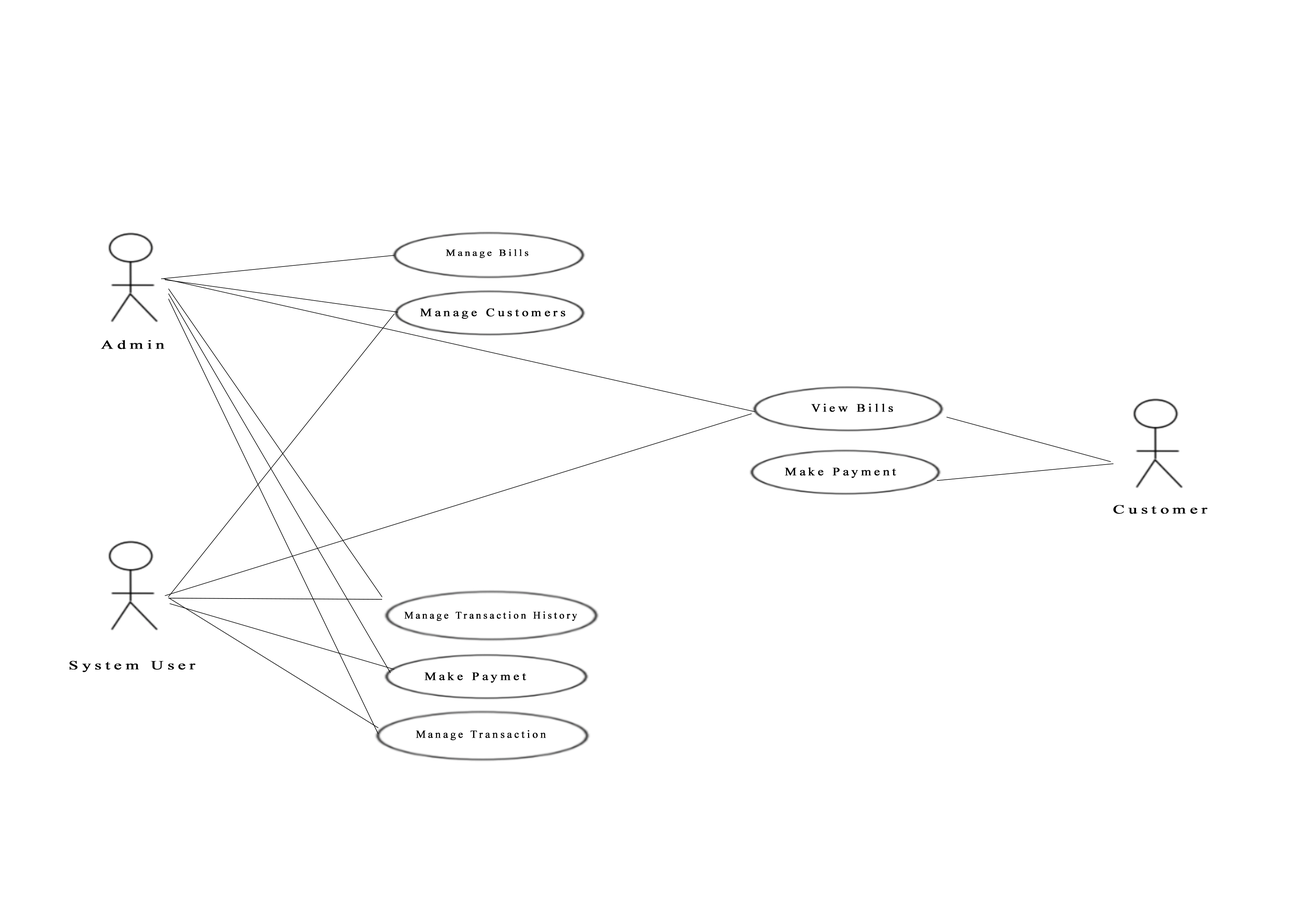
<style>
.page{position:relative;width:1299px;height:918px;background:#ffffff}
.page>*{position:absolute;margin:0}
.t1{font:9.5px "TimesNewRomanPSMT";letter-spacing:0.2em;color:#000000;font-weight:bold;scale:1.11 1}
.t2{font:11.5px "TimesNewRomanPSMT";letter-spacing:0.2em;color:#000000;font-weight:bold;scale:1.13 1}
.t3{font:12.4px "TimesNewRomanPSMT";letter-spacing:0.2em;color:#000000;font-weight:bold;scale:1.39 1}
.t4{font:10.3px "TimesNewRomanPSMT";letter-spacing:0.2em;color:#000000;font-weight:bold}
.t5{font:11px "TimesNewRomanPSMT";letter-spacing:0.2em;color:#000000;font-weight:bold}
</style>
<div class="page">
<p class="t1" style="left:446px;top:249px;width:82px;height:9px">Manage Bills</p>
<p class="t2" style="left:420px;top:308px;width:145px;height:11px">Manage Customers</p>
<p class="t3" style="left:101px;top:340px;width:63px;height:9px">Admin</p>
<p class="t2" style="left:811px;top:404px;width:82px;height:8px">View Bills</p>
<p class="t2" style="left:784px;top:467px;width:112px;height:11px">Make Payment</p>
<p class="t3" style="left:1113px;top:505px;width:94px;height:9px">Customer</p>
<p class="t4" style="left:404px;top:611px;width:173px;height:10px">Manage Transaction History</p>
<p class="t3" style="left:69px;top:661px;width:126px;height:11px">System User</p>
<p class="t2" style="left:424px;top:672px;width:102px;height:11px">Make Paymet</p>
<p class="t5" style="left:416px;top:730px;width:130px;height:10px">Manage Transaction</p>
</div>
